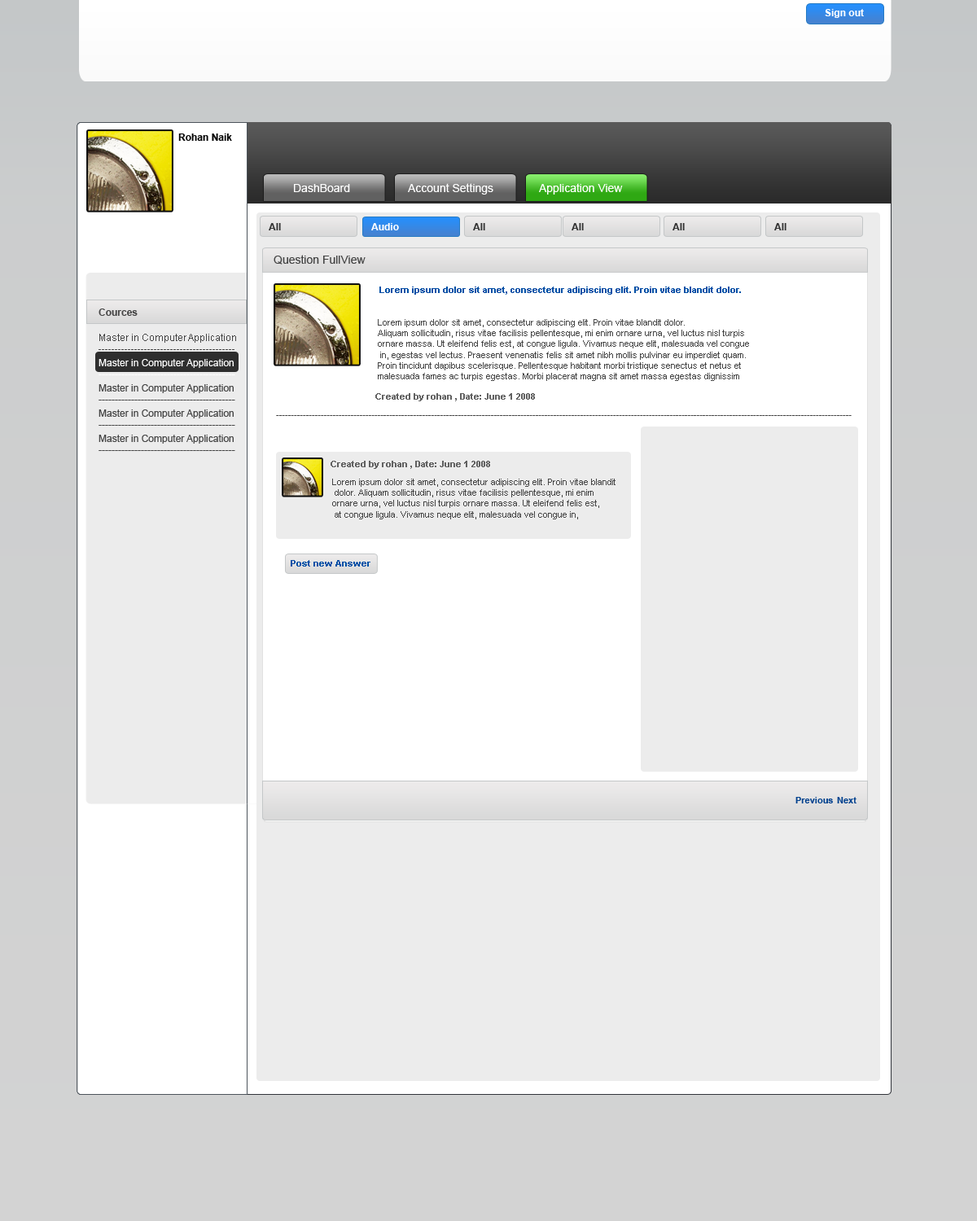
<style>
.page{position:relative;width:977px;height:1221px;background:#ececec}
.page>*{position:absolute;margin:0}
.t1{font:9.8px "Arial-BoldMT";color:#ffffff}
.t2{font:9.8px "Arial-BoldMT";color:#060606}
.t3{font:11.4px "ArialMT";color:#ffffff}
.t4{font:9.8px "Arial-BoldMT";color:#323232}
.t5{font:11.4px "ArialMT";color:#454545}
.t6{font:9px "Arial-BoldMT";color:#0350a6}
.t7{font:9.8px "Arial-BoldMT";color:#464646}
.t8{font:9px "ArialMT";color:#454545}
.t9{font:9.8px "ArialMT";color:#464646}
.t10{font:9.8px "ArialMT";color:#ffffff}
.t11{font:9px "Arial-BoldMT";color:#616161}
.t12{font:9px "Arial-BoldMT";color:#02418e}
</style>
<div class="page">
<p class="t1" style="left:824px;top:9px;width:40px;height:9px">Sign out</p>
<p class="t2" style="left:178px;top:133px;width:54px;height:8px">Rohan Naik</p>
<p class="t3" style="left:294px;top:184px;width:56px;height:8px">DashBoard</p>
<p class="t3" style="left:408px;top:183px;width:85px;height:12px">Account Settings</p>
<p class="t3" style="left:539px;top:183px;width:84px;height:12px">Application View</p>
<p class="t4" style="left:269px;top:223px;width:12px;height:7px">All</p>
<p class="t1" style="left:371px;top:223px;width:28px;height:7px">Audio</p>
<p class="t4" style="left:473px;top:223px;width:12px;height:7px">All</p>
<p class="t4" style="left:571px;top:223px;width:13px;height:7px">All</p>
<p class="t4" style="left:672px;top:223px;width:13px;height:7px">All</p>
<p class="t4" style="left:774px;top:223px;width:12px;height:7px">All</p>
<p class="t5" style="left:273px;top:255px;width:92px;height:10px">Question FullView</p>
<p class="t6" style="left:379px;top:286px;width:362px;height:9px">Lorem ipsum dolor sit amet, consectetur adipiscing elit. Proin vitae blandit dolor.</p>
<p class="t7" style="left:98px;top:308px;width:40px;height:8px">Cources</p>
<p class="t8" style="left:378px;top:319px;width:371px;height:62px">Lorem ipsum dolor sit amet, consectetur adipiscing elit. Proin vitae blandit dolor. <br>Aliquam sollicitudin, risus vitae facilisis pellentesque, mi enim ornare urna, vel luctus nisl turpis <br>ornare massa. Ut eleifend felis est, at congue ligula. Vivamus neque elit, malesuada vel congue<br> in, egestas vel lectus. Praesent venenatis felis sit amet nibh mollis pulvinar eu imperdiet quam. <br>Proin tincidunt dapibus scelerisque. Pellentesque habitant morbi tristique senectus et netus et <br>malesuada fames ac turpis egestas. Morbi placerat magna sit amet massa egestas dignissim</p>
<p class="t9" style="left:98px;top:334px;width:138px;height:16px">Master in Computer Application<br>------------------------------------------</p>
<p class="t10" style="left:98px;top:359px;width:137px;height:16px">Master in Computer Application<br>------------------------------------------</p>
<p class="t9" style="left:98px;top:384px;width:137px;height:16px">Master in Computer Application<br>------------------------------------------</p>
<p class="t11" style="left:375px;top:393px;width:160px;height:8px">Created by rohan , Date: June 1 2008</p>
<p class="t9" style="left:98px;top:409px;width:137px;height:17px">Master in Computer Application<br>------------------------------------------</p>
<p class="t8" style="left:276px;top:415px;width:575px;height:1px">-------------------------------------------------------------------------------------------------------------------------------------------------------------------------------------------------</p>
<p class="t9" style="left:98px;top:435px;width:137px;height:16px">Master in Computer Application<br>------------------------------------------</p>
<p class="t11" style="left:330px;top:461px;width:160px;height:8px">Created by rohan , Date: June 1 2008</p>
<p class="t8" style="left:332px;top:479px;width:283px;height:40px">Lorem ipsum dolor sit amet, consectetur adipiscing elit. Proin vitae blandit<br> dolor. Aliquam sollicitudin, risus vitae facilisis pellentesque, mi enim <br>ornare urna, vel luctus nisl turpis ornare massa. Ut eleifend felis est,<br> at congue ligula. Vivamus neque elit, malesuada vel congue in,</p>
<p class="t6" style="left:291px;top:560px;width:79px;height:6px">Post new Answer</p>
<p class="t12" style="left:795px;top:797px;width:38px;height:6px">Previous</p>
<p class="t12" style="left:837px;top:797px;width:19px;height:6px">Next</p>
</div>
